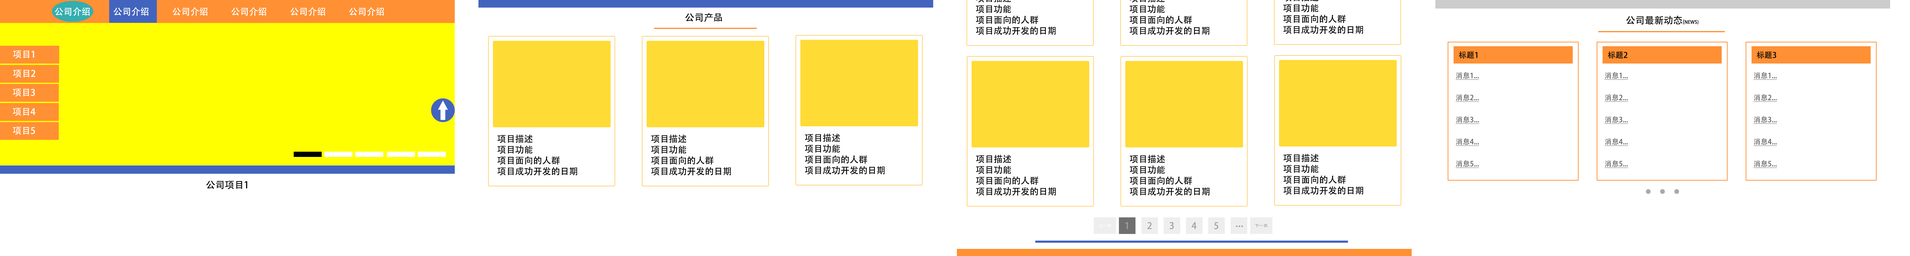
<style>
.page{position:relative;width:1910px;height:256px;background:#ffffff}
.page>*{position:absolute;margin:0}
.t1{font:9px "AdobeHeitiStd-Regular";color:#ffffff}
.t2{font:9.5px "AdobeHeitiStd-Regular";color:#000000}
.t3{font:5.4px "AdobeHeitiStd-Regular";color:#000000}
.t4{font:4.7px "AdobeHeitiStd-Regular";color:#000000}
.t5{font:7.8px "AdobeHeitiStd-Regular";color:#000000}
.t6{font:7.1px/22px "AdobeHeitiStd-Regular";color:#666666;text-decoration:underline}
.t7{font:9px "AdobeHeitiStd-Regular";color:#000000}
.t8{font:9px "AdobeHeitiStd-Regular";color:#a1a1a1}
.t9{font:3.6px "AdobeHeitiStd-Regular";color:#ffffff;scale:1.23 1}
.t10{font:9px "AdobeHeitiStd-Regular";color:#a1a1a1;scale:1.23 1}
.t11{font:3.6px "AdobeHeitiStd-Regular";color:#a1a1a1;scale:1.23 1}
</style>
<div class="page">
<p class="t1" style="left:55px;top:7px;width:35px;height:9px">公司介绍</p>
<p class="t1" style="left:113px;top:7px;width:35px;height:9px">公司介绍</p>
<p class="t1" style="left:172px;top:7px;width:35px;height:9px">公司介绍</p>
<p class="t1" style="left:231px;top:7px;width:35px;height:9px">公司介绍</p>
<p class="t1" style="left:290px;top:7px;width:35px;height:9px">公司介绍</p>
<p class="t1" style="left:349px;top:7px;width:35px;height:9px">公司介绍</p>
<p class="t2" style="left:685px;top:13px;width:37px;height:9px">公司产品</p>
<p class="t2" style="left:1626px;top:16px;width:72px;height:9px">公司最新动态<span class="t3">(</span><span class="t4">NEWS)</span></p>
<p class="t1" style="left:13px;top:50px;width:21px;height:8px">项目1</p>
<p class="t5" style="left:1459px;top:51px;width:18px;height:7px">标题1</p>
<p class="t5" style="left:1608px;top:51px;width:19px;height:7px">标题2</p>
<p class="t5" style="left:1757px;top:51px;width:19px;height:7px">标题3</p>
<p class="t1" style="left:13px;top:70px;width:22px;height:8px">项目2</p>
<p class="t6" style="left:1455px;top:72px;width:24px;height:96px">消息1...<br>消息2...<br>消息3...<br>消息4...<br>消息5...</p>
<p class="t6" style="left:1604px;top:72px;width:24px;height:96px">消息1...<br>消息2...<br>消息3...<br>消息4...<br>消息5...</p>
<p class="t6" style="left:1753px;top:72px;width:24px;height:96px">消息1...<br>消息2...<br>消息3...<br>消息4...<br>消息5...</p>
<p class="t1" style="left:13px;top:89px;width:22px;height:8px">项目3</p>
<p class="t1" style="left:13px;top:108px;width:23px;height:8px">项目4</p>
<p class="t1" style="left:13px;top:127px;width:22px;height:8px">项目5</p>
<p class="t7" style="left:497px;top:134px;width:80px;height:42px">项目描述<br>项目功能<br>项目面向的人群<br>项目成功开发的日期</p>
<p class="t7" style="left:651px;top:134px;width:80px;height:42px">项目描述<br>项目功能<br>项目面向的人群<br>项目成功开发的日期</p>
<p class="t7" style="left:805px;top:133px;width:80px;height:42px">项目描述<br>项目功能<br>项目面向的人群<br>项目成功开发的日期</p>
<p class="t7" style="left:976px;top:155px;width:80px;height:41px">项目描述<br>项目功能<br>项目面向的人群<br>项目成功开发的日期</p>
<p class="t7" style="left:1130px;top:155px;width:80px;height:41px">项目描述<br>项目功能<br>项目面向的人群<br>项目成功开发的日期</p>
<p class="t7" style="left:1283px;top:154px;width:80px;height:41px">项目描述<br>项目功能<br>项目面向的人群<br>项目成功开发的日期</p>
<p class="t2" style="left:206px;top:180px;width:41px;height:9px">公司项目1</p>
<p class="t8" style="left:1125px;top:222px;width:3px;height:7px">1</p>
<p class="t8" style="left:1147px;top:222px;width:5px;height:7px">2</p>
<p class="t8" style="left:1170px;top:222px;width:4px;height:7px">3</p>
<p class="t8" style="left:1192px;top:222px;width:5px;height:7px">4</p>
<p class="t8" style="left:1214px;top:222px;width:4px;height:7px">5</p>
<p class="t9" style="left:1098px;top:224px;width:13px;height:3px">上一页</p>
<p class="t10" style="left:1236px;top:225px;width:7px;height:2px">...</p>
<p class="t11" style="left:1255px;top:224px;width:13px;height:3px">下一页</p>
</div>
